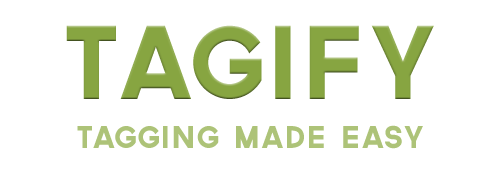
<style>
.page{position:relative;width:500px;height:175px;background:#ffffff}
.page>*{position:absolute;margin:0}
.t1{font:100px "Governor";letter-spacing:0.025em;color:#87a541;text-transform:uppercase}
.t2{font:30px "Governor";letter-spacing:0.025em;color:#adc378;text-transform:uppercase}
</style>
<div class="page">
<p class="t1" style="left:66px;top:25px;width:368px;height:74px">tagify</p>
<p class="t2" style="left:77px;top:125px;width:346px;height:24px">Tagging Made easy</p>
</div>
